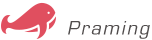
<style>
.page{position:relative;width:152px;height:40px;background:#ffffff}
.page>*{position:absolute;margin:0}
.t1{font:18px "Square721-Italic";letter-spacing:0.1em;color:#504c4c}
</style>
<div class="page">
<p class="t1" style="left:68px;top:21px;width:82px;height:18px">Praming</p>
</div>
